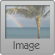
<style>
.page{position:relative;width:55px;height:55px}
.page>*{position:absolute;margin:0}
.t1{font:11px "ITCKabelStd-Book"}
</style>
<div class="page">
<p class="t1" style="left:13px;top:41px;width:27px;height:10px">Image</p>
</div>
